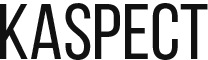
<style>
.page{position:relative;width:208px;height:60px;background:#ffffff}
.page>*{position:absolute;margin:0}
.t1{font:79px "BebasNeueRegular";color:#121111}
</style>
<div class="page">
<p class="t1" style="left:0px;top:3px;width:208px;height:57px">KASPECT</p>
</div>
